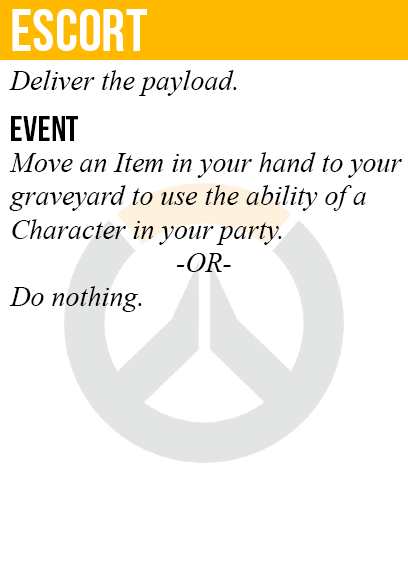
<style>
.page{position:relative;width:408px;height:585px;background:#ffffff}
.page>*{position:absolute;margin:0}
.t1{font:60px "BebasNeue";color:#ffffff}
.t2{font:28px "TimesNewRomanPS-ItalicMT";color:#000000}
.t3{font:36px "BebasNeue";color:#000000}
</style>
<div class="page">
<p class="t1" style="left:12px;top:9px;width:135px;height:42px">escort</p>
<p class="t2" style="left:9px;top:70px;width:228px;height:26px">Deliver the payload.</p>
<p class="t3" style="left:11px;top:116px;width:67px;height:25px">event</p>
<p class="t2" style="left:9px;top:152px;width:393px;height:160px">Move an Item in your hand to your<br>graveyard to use the ability of a<br>Character in your party.<br><br>Do nothing.</p>
<p class="t2" style="left:176px;top:253px;width:55px;height:19px">-OR-</p>
</div>
